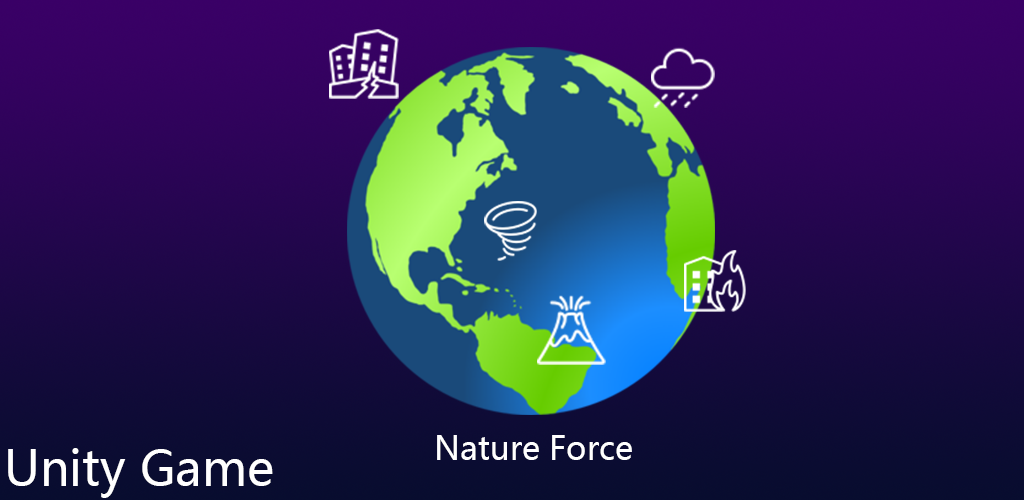
<style>
.page{position:relative;width:1024px;height:500px}
.page>*{position:absolute;margin:0}
.t1{font:32px "MicrosoftYaHei";color:#ffffff}
.t2{font:48px "MicrosoftYaHei";color:#ffffff}
</style>
<div class="page">
<p class="t1" style="left:437px;top:435px;width:195px;height:25px">Nature Force</p>
<p class="t2" style="left:8px;top:448px;width:265px;height:50px">Unity Game</p>
</div>
